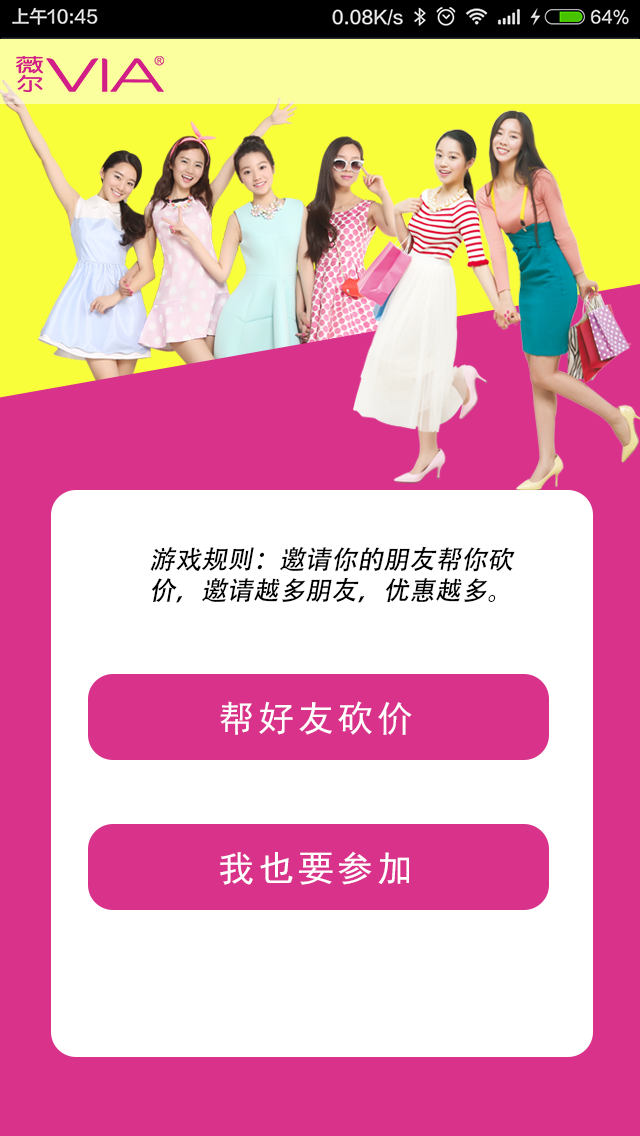
<style>
.page{position:relative;width:640px;height:1136px;background:#d9328a}
.page>*{position:absolute;margin:0}
.t1{font:26px "AdobeHeitiStd-Regular";color:#000000;font-style:italic}
.t2{font:36px "SimHei";letter-spacing:0.1em;color:#ffffff}
</style>
<div class="page">
<p class="t1" style="left:150px;top:546px;width:365px;height:57px">游戏规则：邀请你的朋友帮你砍价，邀请越多朋友，优惠越多。</p>
<p class="t2" style="left:220px;top:701px;width:192px;height:34px">帮好友砍价</p>
<p class="t2" style="left:220px;top:851px;width:189px;height:34px">我也要参加</p>
</div>
